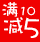
<style>
.page{position:relative;width:40px;height:42px;background:#f00101}
.page>*{position:absolute;margin:0}
.t1{font:12px "DFWaWaSC-W5";color:#ffffff}
.t2{font:18px "DFWaWaSC-W5";color:#ffffff}
.t3{font:24px "DFWaWaSC-W5";color:#ffffff}
.t4{font:30px "DFWaWaSC-W5";color:#ffffff}
</style>
<div class="page">
<p class="t1" style="left:2px;top:2px;width:34px;height:15px"><span class="t2">满</span>10</p>
<p class="t3" style="left:4px;top:17px;width:19px;height:17px">减</p>
<p class="t4" style="left:24px;top:17px;width:15px;height:21px">5</p>
</div>
